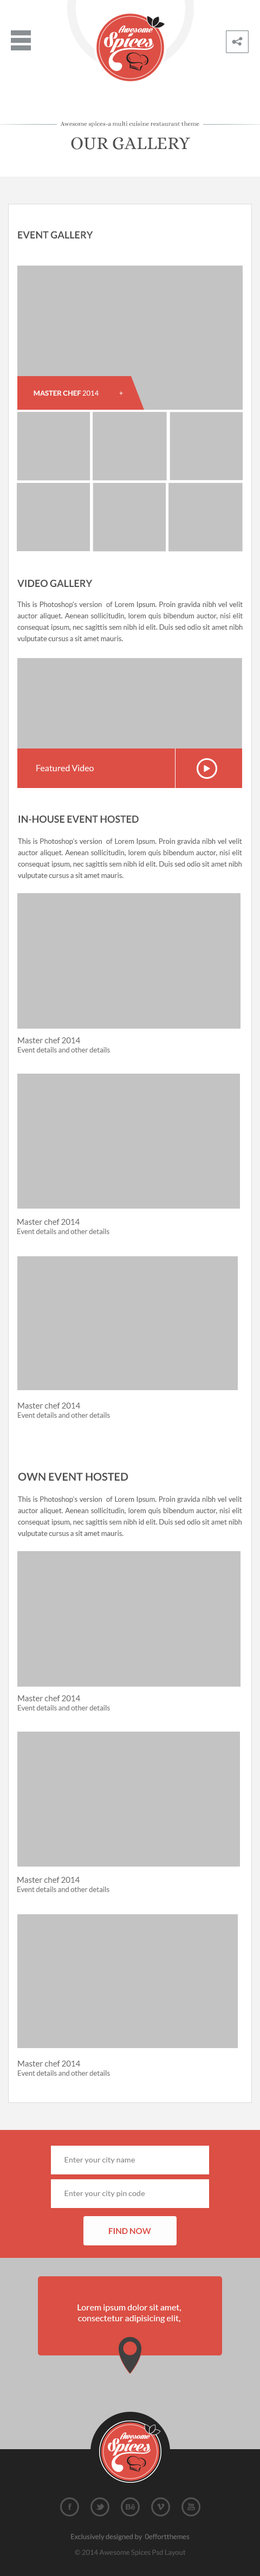
<style>
.page{position:relative;width:260px;height:2576px;background:#c3c3c3}
.page>*{position:absolute;margin:0}
.t1{font:6.2px "Alice-Regular";color:#505050}
.t2{font:18.1px "Alice-Regular";color:#505050;text-transform:uppercase}
.t3{font:9.8px "Lato-Bold";color:#505050;text-transform:uppercase}
.t4{font:7px "Lato-Regular";color:#ffffff;text-transform:uppercase}
.t5{font:7px "Lato-Bold";color:#ffffff;text-transform:uppercase}
.t6{font:7px/11.4px "Lato-Regular";color:#666666}
.t7{font:8.6px "Lato-Regular";color:#ffffff}
.t8{font:8.1px "Lato-Regular";color:#666666}
.t9{font:7px "Lato-Regular";color:#777777}
.t10{font:10.8px "Lato-Bold";color:#505050;text-transform:uppercase}
.t11{font:7.8px "Lato-Regular";color:#888888}
.t12{font:8.2px "Lato-Bold";color:#db4f44;text-transform:uppercase}
.t13{font:8.7px/10.8px "Lato-Regular";color:#ffffff}
.t14{font:7px "Lato-Regular";color:#737373}
.t15{font:7px "Lato-Regular";color:#5a5a5a}
</style>
<div class="page">
<p class="t1" style="left:60px;top:121px;width:139px;height:6px">Awesome spices-a multi cuisine restaurant theme</p>
<p class="t2" style="left:71px;top:137px;width:119px;height:13px">Our gallery</p>
<p class="t3" style="left:18px;top:231px;width:75px;height:7px">event gallery</p>
<p class="t4" style="left:34px;top:390px;width:89px;height:6px"><span class="t5">Master chef</span> 2014               +</p>
<p class="t3" style="left:17px;top:579px;width:76px;height:8px">video gallery</p>
<p class="t6" style="left:17px;top:602px;width:226px;height:40px;text-align:justify">This is Photoshop's version  of Lorem Ipsum. Proin gravida nibh vel velit auctor aliquet. Aenean sollicitudin, lorem quis bibendum auctor, nisi elit consequat ipsum, nec sagittis sem nibh id elit. Duis sed odio sit amet nibh vulputate cursus a sit amet mauris.</p>
<p class="t7" style="left:36px;top:765px;width:58px;height:7px">Featured Video</p>
<p class="t3" style="left:18px;top:815px;width:121px;height:8px">In-house event hosted</p>
<p class="t6" style="left:18px;top:838px;width:224px;height:41px;text-align:justify">This is Photoshop's version  of Lorem Ipsum. Proin gravida nibh vel velit auctor aliquet. Aenean sollicitudin, lorem quis bibendum auctor, nisi elit consequat ipsum, nec sagittis sem nibh id elit. Duis sed odio sit amet nibh vulputate cursus a sit amet mauris.</p>
<p class="t8" style="left:18px;top:1037px;width:62px;height:6px">Master chef 2014</p>
<p class="t9" style="left:18px;top:1047px;width:92px;height:6px">Event details and other details</p>
<p class="t8" style="left:17px;top:1219px;width:63px;height:6px">Master chef 2014</p>
<p class="t9" style="left:17px;top:1229px;width:92px;height:5px">Event details and other details</p>
<p class="t8" style="left:18px;top:1403px;width:62px;height:6px">Master chef 2014</p>
<p class="t9" style="left:18px;top:1412px;width:92px;height:6px">Event details and other details</p>
<p class="t10" style="left:18px;top:1473px;width:110px;height:8px">own event hosted</p>
<p class="t6" style="left:18px;top:1496px;width:224px;height:41px;text-align:justify">This is Photoshop's version  of Lorem Ipsum. Proin gravida nibh vel velit auctor aliquet. Aenean sollicitudin, lorem quis bibendum auctor, nisi elit consequat ipsum, nec sagittis sem nibh id elit. Duis sed odio sit amet nibh vulputate cursus a sit amet mauris.</p>
<p class="t8" style="left:18px;top:1695px;width:62px;height:6px">Master chef 2014</p>
<p class="t9" style="left:18px;top:1705px;width:92px;height:5px">Event details and other details</p>
<p class="t8" style="left:17px;top:1877px;width:63px;height:6px">Master chef 2014</p>
<p class="t9" style="left:17px;top:1887px;width:92px;height:5px">Event details and other details</p>
<p class="t8" style="left:18px;top:2061px;width:62px;height:6px">Master chef 2014</p>
<p class="t9" style="left:18px;top:2070px;width:92px;height:6px">Event details and other details</p>
<p class="t11" style="left:64px;top:2157px;width:71px;height:7px">Enter your city name</p>
<p class="t11" style="left:64px;top:2191px;width:81px;height:6px">Enter your city pin code</p>
<p class="t12" style="left:109px;top:2228px;width:42px;height:6px">find Now</p>
<p class="t13" style="left:78px;top:2304px;width:103px;height:19px;text-align:center">Lorem ipsum dolor sit amet, consectetur adipisicing elit,</p>
<p class="t14" style="left:71px;top:2534px;width:119px;height:7px">Exclusively designed by  0effortthemes</p>
<p class="t15" style="left:75px;top:2549px;width:111px;height:7px">© 2014 Awesome Spices Psd Layout</p>
</div>
